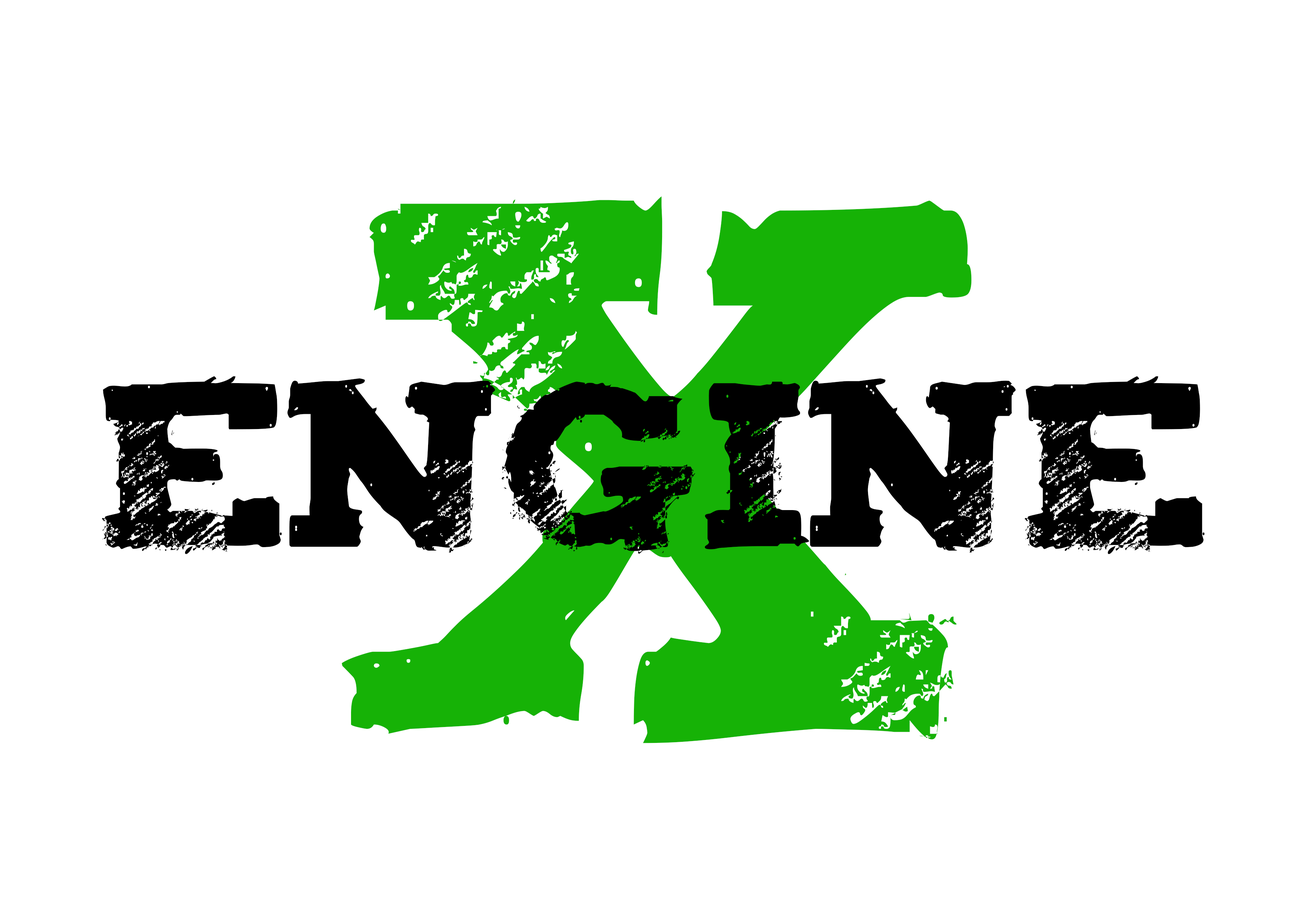
<style>
.page{position:relative;width:1299px;height:918px;background:#ffffff}
.page>*{position:absolute;margin:0}
.t1{font:617px "Tiza";color:#16b206}
.t2{font:192.8px "Tiza";color:#000000}
</style>
<div class="page">
<p class="t1" style="left:342px;top:196px;width:629px;height:547px">x</p>
<p class="t2" style="left:102px;top:376px;width:1102px;height:178px">Engine</p>
</div>
